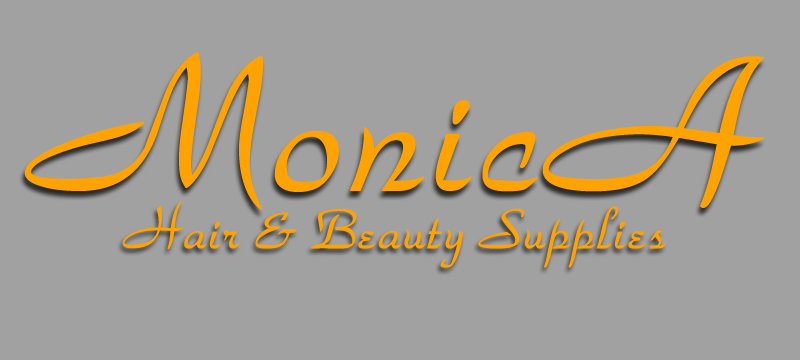
<style>
.page{position:relative;width:800px;height:360px;background:#a1a1a1}
.page>*{position:absolute;margin:0}
.t1{font:200px "ParkAvenue-NormalA";color:#ffa303;font-weight:bold}
.t2{font:58.3px "ParkAvenue-NormalA";color:#ffa303;font-weight:bold}
</style>
<div class="page">
<p class="t1" style="left:24px;top:52px;width:740px;height:158px">MonicA</p>
<p class="t2" style="left:122px;top:201px;width:545px;height:67px">Hair &amp; Beauty Supplies</p>
</div>
